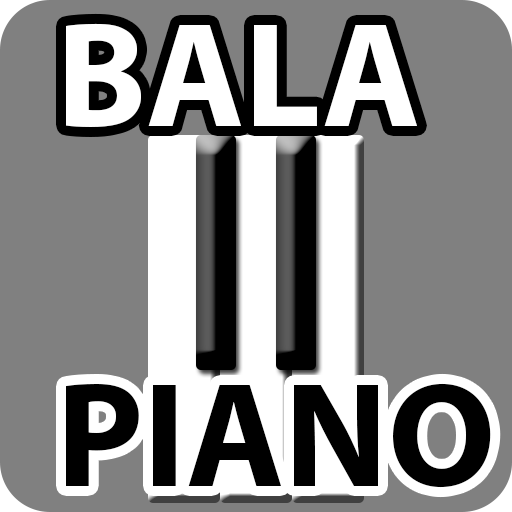
<style>
.page{position:relative;width:512px;height:512px;background:#808080}
.page>*{position:absolute;margin:0}
.t1{font:150px "MyriadPro-Bold";color:#ffffff}
.t2{font:150px "MyriadPro-Bold";color:#000000}
</style>
<div class="page">
<p class="t1" style="left:66px;top:23px;width:351px;height:104px">BALA</p>
<p class="t2" style="left:66px;top:383px;width:425px;height:105px">PIANO</p>
</div>
